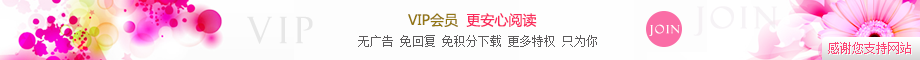
<style>
.page{position:relative;width:920px;height:60px;background:#fdfdfd}
.page>*{position:absolute;margin:0}
.t1{font:30px "FelixTitlingMT";letter-spacing:0.16em;color:#e8dee6;font-weight:bold}
.t2{font:36px "FelixTitlingMT";letter-spacing:0.16em;color:#e7e7e7;font-weight:bold}
.t3{font:14px "MicrosoftYaHei";color:#937611;text-transform:uppercase}
.t4{font:14px "MicrosoftYaHei";color:#fa2a5b;text-transform:uppercase}
.t5{font:11px "FelixTitlingMT";letter-spacing:0.16em;color:#ffffff;font-weight:bold}
.t6{font:12px "SimSun";color:#5d5b5c;text-transform:uppercase}
.t7{font:12px "SimSun";color:#fb4574;text-transform:uppercase}
</style>
<div class="page">
<p class="t1" style="left:693px;top:6px;width:84px;height:30px;opacity:0.38">JOIN</p>
<p class="t2" style="left:247px;top:16px;width:66px;height:28px">VIP</p>
<p class="t3" style="left:408px;top:13px;width:129px;height:14px">vip会员  <span class="t4">更安心阅读</span></p>
<p class="t5" style="left:649px;top:24px;width:31px;height:12px">JOIN</p>
<p class="t6" style="left:358px;top:35px;width:239px;height:12px">无广告 免回复 免积分下载 更多特权 只为你</p>
<p class="t7" style="left:828px;top:42px;width:83px;height:12px">感谢您支持网站</p>
</div>
